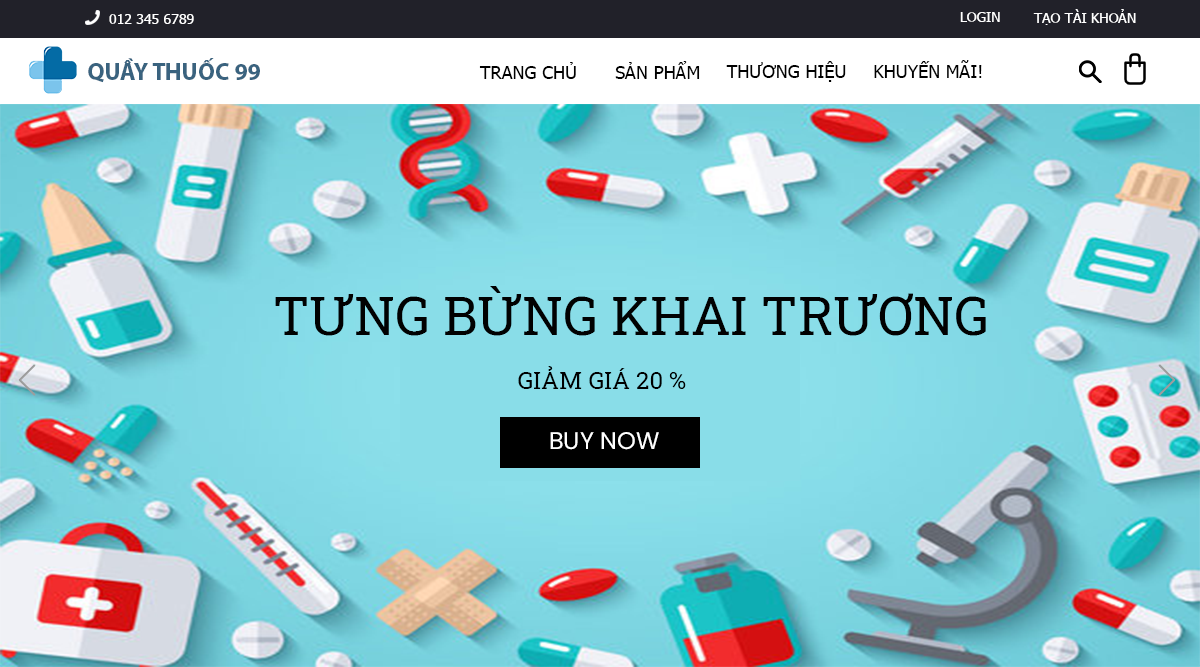
<style>
.page{position:relative;width:1200px;height:667px}
.page>*{position:absolute;margin:0}
.t1{font:14px "Tahoma";color:#ffffff}
.t2{font:24px "MyriadPro-Bold";color:#3a637f}
.t3{font:18px "Tahoma";color:#000000}
.t4{font:53px "RobotoSlab-Regular";color:#010101}
.t5{font:24px "RobotoSlab-Regular";color:#000000}
</style>
<div class="page">
<p class="t1" style="left:109px;top:14px;width:85px;height:10px">012 345 6789</p>
<p class="t1" style="left:960px;top:12px;width:40px;height:10px">LOGIN</p>
<p class="t1" style="left:1033px;top:9px;width:103px;height:16px">TẠO TÀI KHOẢN</p>
<p class="t2" style="left:88px;top:58px;width:172px;height:25px">QUẦY THUỐC 99</p>
<p class="t3" style="left:479px;top:62px;width:97px;height:17px">TRANG CHỦ</p>
<p class="t3" style="left:615px;top:61px;width:85px;height:18px">SẢN PHẨM</p>
<p class="t3" style="left:726px;top:61px;width:120px;height:21px">THƯƠNG HIỆU</p>
<p class="t3" style="left:874px;top:60px;width:108px;height:18px">KHUYẾN MÃI!</p>
<p class="t4" style="left:275px;top:286px;width:711px;height:50px">TƯNG BỪNG KHAI TRƯƠNG</p>
<p class="t5" style="left:518px;top:366px;width:168px;height:23px">GIẢM GIÁ 20 %</p>
</div>
